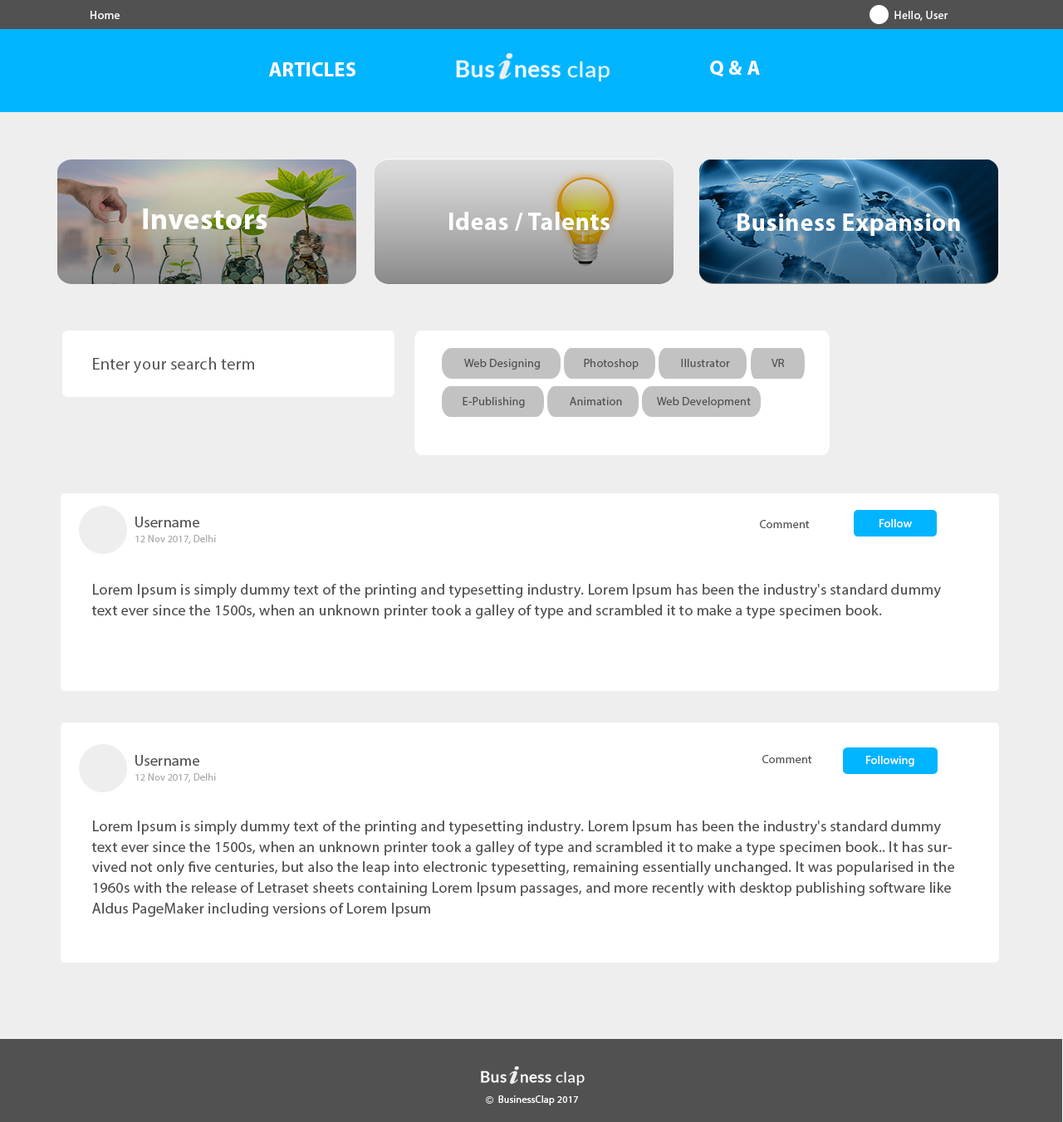
<style>
.page{position:relative;width:1063px;height:1122px;background:#ffffff}
.page>*{position:absolute;margin:0}
.t1{font:11.6px "MyriadPro-Regular";letter-spacing:0.02em;color:#ffffff}
.t2{font:19.9px "MyriadPro-Bold";letter-spacing:0.02em;color:#ffffff}
.t3{font:29.9px "MyriadPro-Bold";letter-spacing:0.02em;color:#ffffff}
.t4{font:24.9px "MyriadPro-Bold";letter-spacing:0.02em;color:#ffffff}
.t5{font:16.6px "MyriadPro-Regular";letter-spacing:0.02em;color:#515151}
.t6{font:11.6px "MyriadPro-Regular";letter-spacing:0.02em;color:#515151}
.t7{font:14.9px "MyriadPro-Regular";letter-spacing:0.02em;color:#515151}
.t8{font:10px "MyriadPro-Regular";letter-spacing:0.02em;color:#aeaeae}
.t9{font:14.9px/20.6px "MyriadPro-Regular";letter-spacing:0.02em;color:#515151}
.t10{font:10px "MyriadPro-Regular";letter-spacing:0.02em;color:#ffffff}
</style>
<div class="page">
<p class="t1" style="left:91px;top:11px;width:29px;height:8px">Home</p>
<p class="t1" style="left:894px;top:11px;width:54px;height:10px">Hello, User</p>
<p class="t2" style="left:269px;top:62px;width:86px;height:14px">ARTICLES</p>
<p class="t2" style="left:710px;top:61px;width:50px;height:16px">Q &amp; A</p>
<p class="t3" style="left:143px;top:208px;width:124px;height:21px">Investors</p>
<p class="t4" style="left:449px;top:212px;width:161px;height:19px">Ideas / Talents</p>
<p class="t4" style="left:737px;top:213px;width:223px;height:23px">Business Expansion</p>
<p class="t5" style="left:93px;top:357px;width:161px;height:16px">Enter your search term</p>
<p class="t6" style="left:464px;top:359px;width:76px;height:11px">Web Designing</p>
<p class="t6" style="left:584px;top:359px;width:55px;height:11px">Photoshop</p>
<p class="t6" style="left:681px;top:359px;width:49px;height:8px">Illustrator</p>
<p class="t6" style="left:771px;top:359px;width:14px;height:8px">VR</p>
<p class="t6" style="left:463px;top:397px;width:62px;height:11px">E-Publishing</p>
<p class="t6" style="left:570px;top:397px;width:52px;height:8px">Animation</p>
<p class="t6" style="left:657px;top:397px;width:94px;height:11px">Web Development</p>
<p class="t7" style="left:135px;top:517px;width:64px;height:10px">Username</p>
<p class="t6" style="left:760px;top:520px;width:50px;height:8px">Comment</p>
<p class="t1" style="left:879px;top:519px;width:33px;height:8px">Follow</p>
<p class="t8" style="left:135px;top:535px;width:81px;height:9px">12 Nov 2017, Delhi</p>
<p class="t9" style="left:91px;top:584px;width:850px;height:35px">Lorem Ipsum is simply dummy text of the printing and typesetting industry. Lorem Ipsum has been the industry's standard dummy text ever since the 1500s, when an unknown printer took a galley of type and scrambled it to make a type specimen book.</p>
<p class="t7" style="left:135px;top:755px;width:64px;height:11px">Username</p>
<p class="t6" style="left:762px;top:755px;width:50px;height:8px">Comment</p>
<p class="t1" style="left:866px;top:756px;width:48px;height:10px">Following</p>
<p class="t8" style="left:135px;top:773px;width:81px;height:9px">12 Nov 2017, Delhi</p>
<p class="t9" style="left:91px;top:820px;width:863px;height:97px">Lorem Ipsum is simply dummy text of the printing and typesetting industry. Lorem Ipsum has been the industry's standard dummy text ever since the 1500s, when an unknown printer took a galley of type and scrambled it to make a type specimen book.. It has survived not only five centuries, but also the leap into electronic typesetting, remaining essentially unchanged. It was popularised in the 1960s with the release of Letraset sheets containing Lorem Ipsum passages, and more recently with desktop publishing software like Aldus PageMaker including versions of Lorem Ipsum</p>
<p class="t10" style="left:498px;top:1095px;width:80px;height:10px">BusinessClap 2017</p>
</div>
